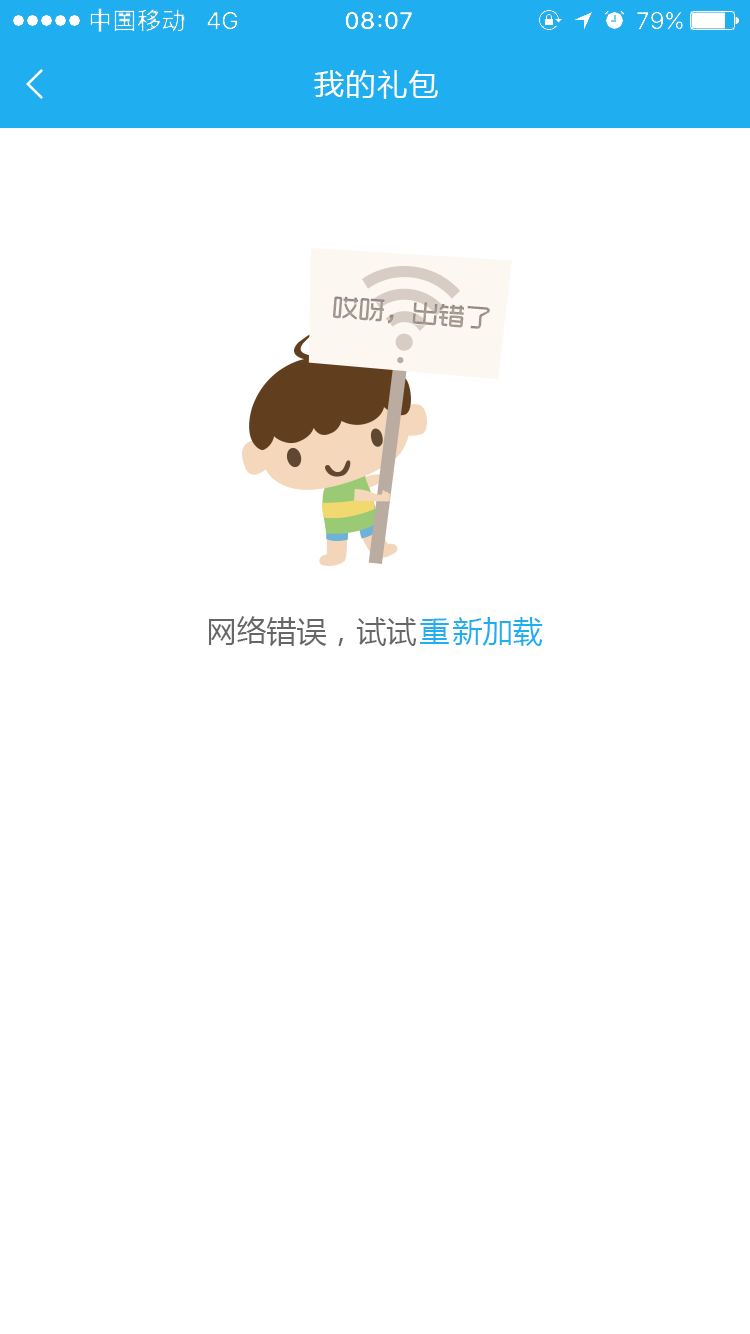
<style>
.page{position:relative;width:750px;height:1334px;background:#ffffff}
.page>*{position:absolute;margin:0}
.t1{font:30px "MicrosoftYaHei";letter-spacing:0.05em;color:#ffffff}
.t2{font:26.5px "TRENDS";color:#a1958c}
.t3{font:30px "MicrosoftYaHei";color:#666666}
.t4{font:30px "MicrosoftYaHei";letter-spacing:0.1em;color:#666666}
.t5{font:30px "MicrosoftYaHei";letter-spacing:0.1em;color:#1faff0}
.t6{font:30px "MicrosoftYaHei";color:#1faff0}
</style>
<div class="page">
<p class="t1" style="left:314px;top:70px;width:124px;height:29px">我的礼包</p>
<p class="t2" style="left:333px;top:296px;width:157px;height:33px;rotate:4deg">哎呀，出错了</p>
<p class="t3" style="left:209px;top:616px;width:334px;height:30px">网络错误，试<span class="t4">试</span><span class="t5">重</span><span class="t6">新加载</span></p>
</div>
